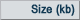
<style>
.page{position:relative;width:80px;height:20px;background:#d9dde0}
.page>*{position:absolute;margin:0}
.t1{font:12px "ArialNarrow";color:#103852;font-weight:bold;scale:1.05 1}
</style>
<div class="page">
<p class="t1" style="left:31px;top:4px;width:44px;height:12px">Size (kb)</p>
</div>
